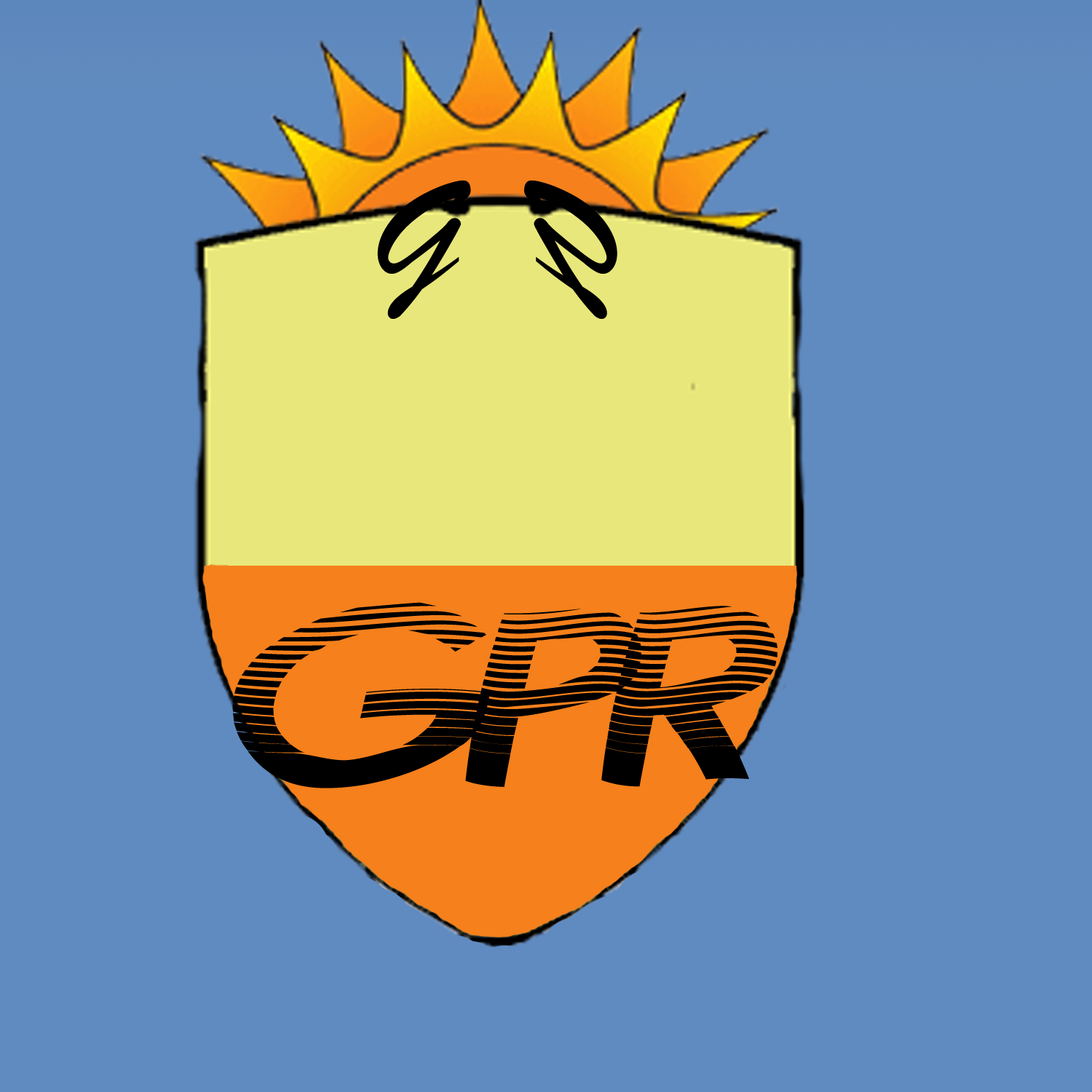
<style>
.page{position:relative;width:1092px;height:1092px;background:#608bc1}
.page>*{position:absolute;margin:0}
.t1{font:151.7px "BrushScriptMT";color:#000000}
.t2{font:344.9px "AustralianSunrise";color:#000000}
</style>
<div class="page">
<p class="t1" style="left:377px;top:180px;width:94px;height:139px">G</p>
<p class="t1" style="left:524px;top:180px;width:93px;height:139px;rotate:180deg">G</p>
<p class="t2" style="left:232px;top:602px;width:258px;height:186px">G</p>
<p class="t2" style="left:601px;top:606px;width:176px;height:181px">R</p>
<p class="t2" style="left:465px;top:609px;width:176px;height:178px">P</p>
</div>
